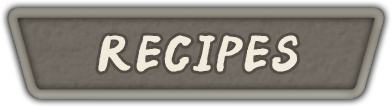
<style>
.page{position:relative;width:392px;height:107px}
.page>*{position:absolute;margin:0}
.t1{font:52.1px "SangSangFlowerRoad";letter-spacing:0.075em;color:#f1ebdb;text-transform:uppercase;font-weight:bold;font-style:italic}
</style>
<div class="page">
<p class="t1" style="left:98px;top:35px;width:200px;height:37px">Recipes</p>
</div>
